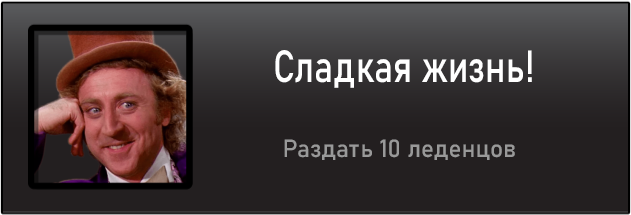
<style>
.page{position:relative;width:631px;height:215px;background:#231f20}
.page>*{position:absolute;margin:0}
.t1{font:44.4px "Bahnschrift";color:#ffffff;scale:0.81 1}
.t2{font:24.6px "Bahnschrift";color:#999999}
</style>
<div class="page">
<p class="t1" style="left:275px;top:50px;width:257px;height:38px">Сладкая жизнь!</p>
<p class="t2" style="left:284px;top:139px;width:231px;height:21px">Раздать 10 леденцов</p>
</div>
